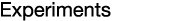
<style>
.page{position:relative;width:174px;height:21px;background:#ffffff}
.page>*{position:absolute;margin:0}
.t1{font:20px "HelveticaNeueLTPro-Roman";color:#000000}
</style>
<div class="page">
<p class="t1" style="left:1px;top:2px;width:110px;height:19px">Experiments</p>
</div>
